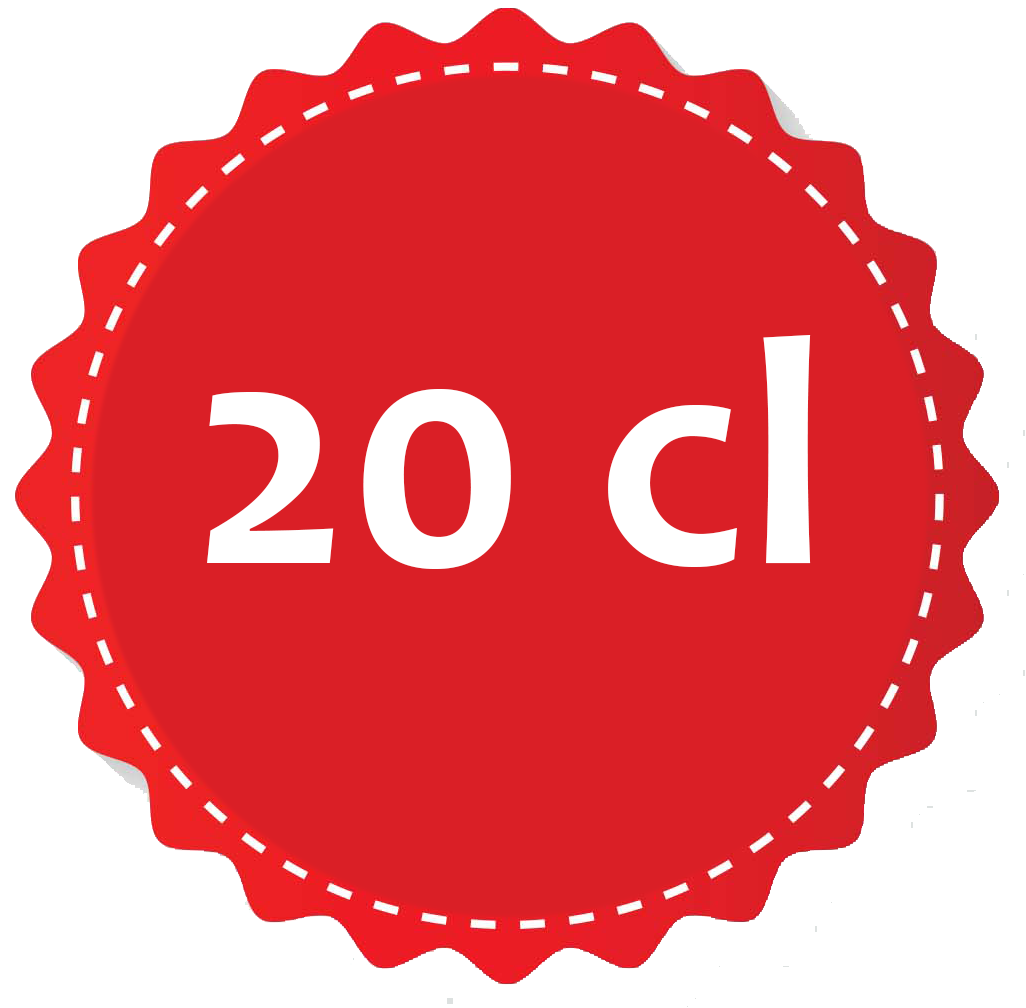
<style>
.page{position:relative;width:1026px;height:1008px;background:#da1f26}
.page>*{position:absolute;margin:0}
.t1{font:330px "Candara-Bold";color:#ffffff}
</style>
<div class="page">
<p class="t1" style="left:207px;top:335px;width:604px;height:234px">20 cl</p>
</div>
